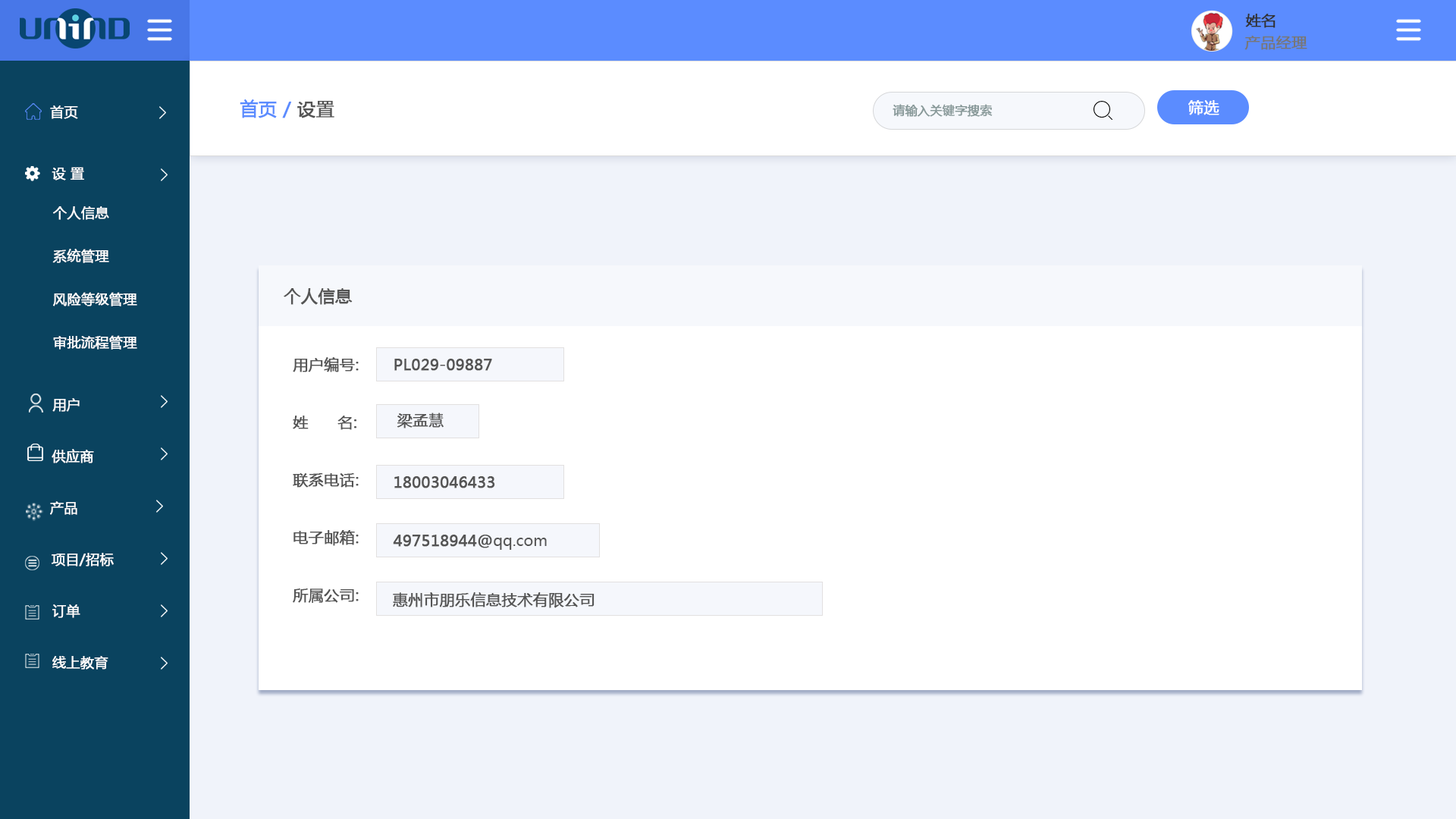
<style>
.page{position:relative;width:1456px;height:819px;background:#ffffff}
.page>*{position:absolute;margin:0}
.t1{font:15.2px "MicrosoftYaHei";color:#333333;text-transform:uppercase;font-weight:bold}
.t2{font:15.2px "MicrosoftYaHei";color:#777777;text-transform:uppercase;font-weight:bold}
.t3{font:18.2px "MicrosoftYaHei";color:#5b8cff;text-transform:uppercase;font-weight:bold}
.t4{font:18.2px "MicrosoftYaHei";color:#555555;text-transform:uppercase;font-weight:bold}
.t5{font:15.2px "MicrosoftYaHei";color:#ffffff;text-transform:uppercase;font-weight:bold}
.t6{font:13.6px "MicrosoftYaHei";color:#ffffff;text-transform:uppercase;font-weight:bold}
.t7{font:12.1px "MicrosoftYaHei";color:#889999;text-transform:uppercase;font-weight:bold}
.t8{font:16.7px "MicrosoftYaHei";color:#555555;text-transform:uppercase;font-weight:bold}
.t9{font:15.2px/14.4px "MicrosoftYaHei";color:#555555;text-transform:uppercase;font-weight:bold}
.t10{font:15.2px "MicrosoftYaHei";color:#555555;text-transform:uppercase;font-weight:bold}
.t11{font:15.2px "MicrosoftYaHei";color:#555555}
</style>
<div class="page">
<p class="t1" style="left:1245px;top:14px;width:30px;height:14px">姓名</p>
<p class="t2" style="left:1244px;top:36px;width:63px;height:14px">产品经理</p>
<p class="t3" style="left:240px;top:99px;width:94px;height:19px">首页 / <span class="t4">设置</span></p>
<p class="t5" style="left:1188px;top:100px;width:31px;height:15px">筛选</p>
<p class="t6" style="left:50px;top:105px;width:28px;height:14px">首页</p>
<p class="t7" style="left:893px;top:104px;width:100px;height:13px">请输入关键字搜索</p>
<p class="t6" style="left:52px;top:167px;width:32px;height:13px">设 置</p>
<p class="t6" style="left:53px;top:206px;width:56px;height:14px">个人信息</p>
<p class="t6" style="left:52px;top:249px;width:57px;height:14px">系统管理</p>
<p class="t6" style="left:53px;top:292px;width:84px;height:14px">风险等级管理</p>
<p class="t8" style="left:284px;top:288px;width:69px;height:17px">个人信息</p>
<p class="t6" style="left:53px;top:335px;width:84px;height:15px">审批流程管理</p>
<p class="t9" style="left:293px;top:357px;width:66px;height:246px">用户编号:<br><br><br><br>姓      名:<br><br><br><br>联系电话:<br><br><br><br>电子邮箱:<br><br><br><br>所属公司:</p>
<p class="t10" style="left:394px;top:359px;width:98px;height:12px">pl029-09887</p>
<p class="t6" style="left:52px;top:398px;width:28px;height:14px">用户</p>
<p class="t10" style="left:397px;top:413px;width:47px;height:15px">梁孟慧</p>
<p class="t6" style="left:52px;top:449px;width:42px;height:14px">供应商</p>
<p class="t10" style="left:394px;top:476px;width:101px;height:12px">18003046433</p>
<p class="t6" style="left:50px;top:501px;width:27px;height:14px">产品</p>
<p class="t10" style="left:393px;top:535px;width:154px;height:15px">497518944@<span class="t11">qq.com</span></p>
<p class="t6" style="left:52px;top:553px;width:62px;height:13px">项目/招标</p>
<p class="t10" style="left:393px;top:592px;width:202px;height:16px">惠州市朋乐信息技术有限公司</p>
<p class="t6" style="left:52px;top:604px;width:28px;height:14px">订单</p>
<p class="t6" style="left:52px;top:656px;width:56px;height:14px">线上教育</p>
</div>
